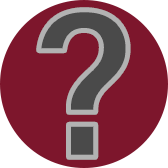
<style>
.page{position:relative;width:168px;height:168px;background:#7d162c}
.page>*{position:absolute;margin:0}
.t1{font:210px "AcuminConcept-Semibold";letter-spacing:-0.04em;color:#4a4a4a}
</style>
<div class="page">
<p class="t1" style="left:38px;top:9px;width:90px;height:149px">?</p>
</div>
